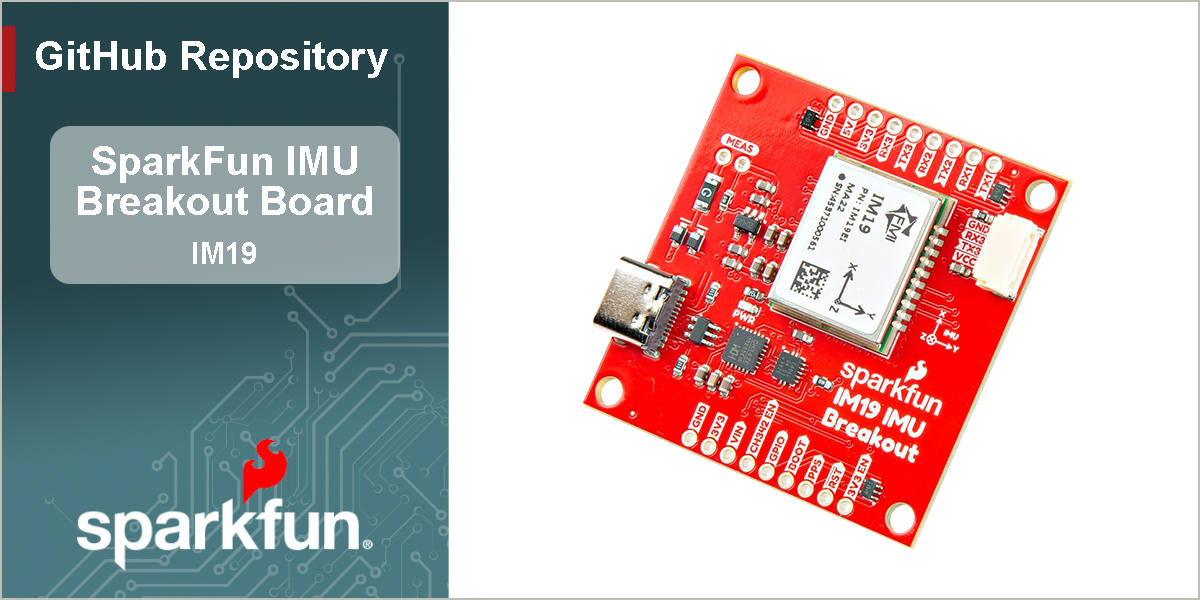
<style>
.page{position:relative;width:1200px;height:600px;background:#ffffff}
.page>*{position:absolute;margin:0}
.t1{font:40px "Arial-BoldMT";color:#ffffff}
.t2{font:30px "Arial-BoldMT";color:#ffffff}
</style>
<div class="page">
<p class="t1" style="left:36px;top:41px;width:352px;height:37px">GitHub Repository</p>
<p class="t1" style="left:78px;top:146px;width:294px;height:69px;text-align:center">SparkFun IMU<br>Breakout Board</p>
<p class="t2" style="left:193px;top:242px;width:63px;height:22px">IM19</p>
</div>
